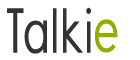
<style>
.page{position:relative;width:140px;height:60px;background:#ffffff}
.page>*{position:absolute;margin:0}
.t1{font:60px "Angostura";color:#333333}
.t2{font:60px "Angostura";color:#91ae00}
</style>
<div class="page">
<p class="t1" style="left:7px;top:7px;width:84px;height:47px">Talki</p>
<p class="t2" style="left:95px;top:19px;width:23px;height:34px">e</p>
</div>
